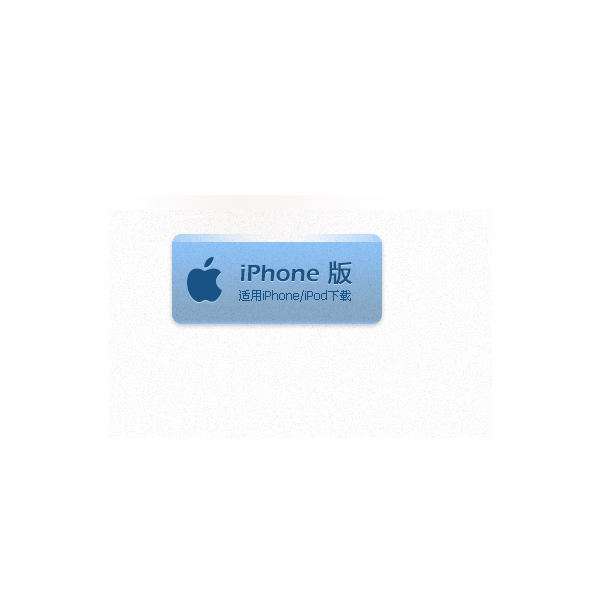
<style>
.page{position:relative;width:600px;height:600px;background:#ffffff}
.page>*{position:absolute;margin:0}
.t1{font:24px "ErasITC-Demi";color:#195386}
.t2{font:24px "MicrosoftYaHei";color:#195386;font-weight:bold}
.t3{font:12px "Tahoma";color:#195386}
.t4{font:12px "SimSun";color:#195386}
</style>
<div class="page">
<p class="t1" style="left:241px;top:261px;width:111px;height:24px">iPhone <span class="t2">版</span></p>
<p class="t3" style="left:239px;top:290px;width:112px;height:12px"><span class="t4">适用</span>iPhone/iPod<span class="t4">下载</span></p>
</div>
